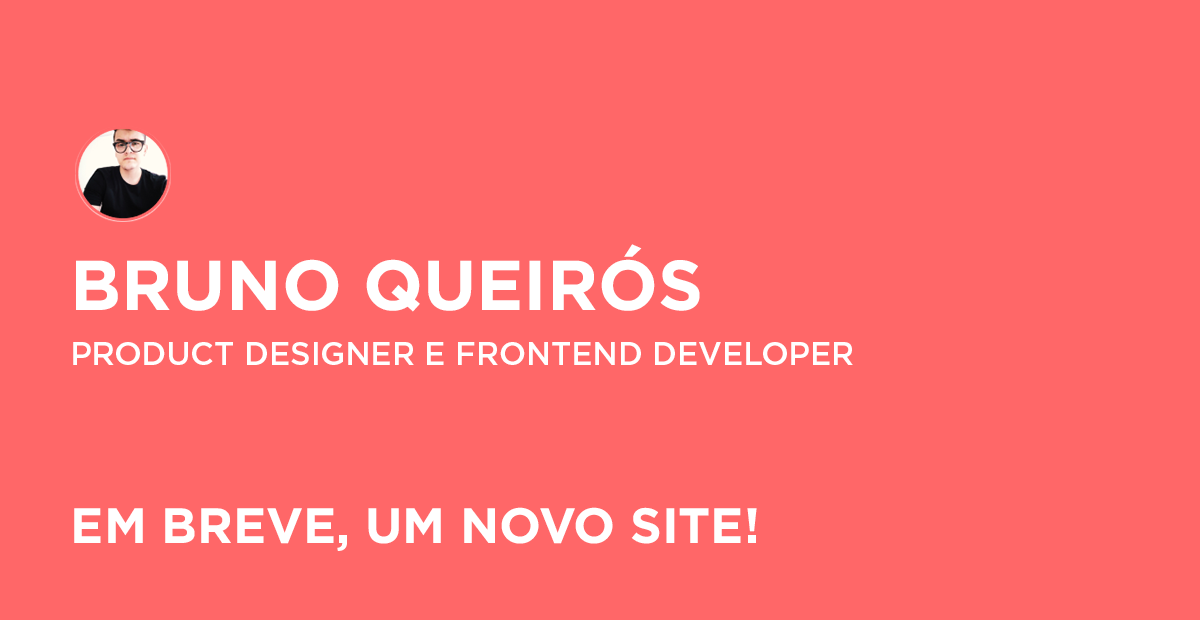
<style>
.page{position:relative;width:1200px;height:620px;background:#ff6768}
.page>*{position:absolute;margin:0}
.t1{font:70.6px "GothamPro-Bold";color:#ffffff;text-transform:uppercase}
.t2{font:31.8px "GothamPro-Medium";color:#ffffff;text-transform:uppercase}
.t3{font:49.4px "GothamPro-Bold";color:#ffffff;text-transform:uppercase}
</style>
<div class="page">
<p class="t1" style="left:76px;top:244px;width:624px;height:68px">Bruno Queirós</p>
<p class="t2" style="left:73px;top:342px;width:780px;height:23px">Product designer e frontend developer</p>
<p class="t3" style="left:74px;top:507px;width:683px;height:44px">Em breve, um novo site!</p>
</div>
